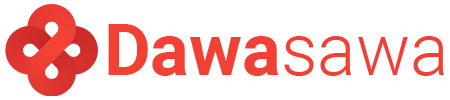
<style>
.page{position:relative;width:450px;height:100px;background:#ffffff}
.page>*{position:absolute;margin:0}
.t1{font:72px "Roboto-Bold";color:#f14135}
.t2{font:72px "Roboto-Light";color:#f14135}
</style>
<div class="page">
<p class="t1" style="left:108px;top:24px;width:336px;height:52px">Dawa<span class="t2">sawa</span></p>
</div>
